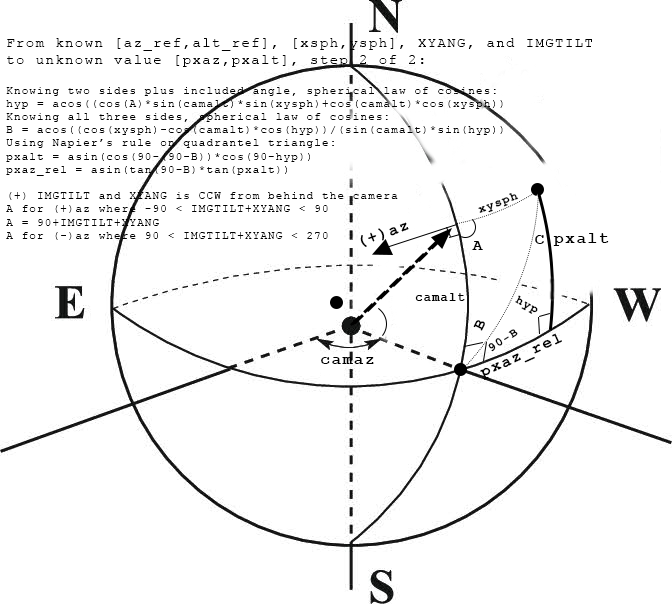
<style>
.page{position:relative;width:672px;height:604px;background:#ffffff}
.page>*{position:absolute;margin:0}
.t1{font:11px "CourierNewPSMT";letter-spacing:0.1em;color:#000000}
.t2{font:14px "CourierNewPSMT";letter-spacing:0.1em;color:#000000}
.t3{font:12px "CourierNewPS-BoldMT";letter-spacing:0.1em;color:#000000}
.t4{font:16px "CourierNewPS-BoldMT";letter-spacing:0.1em;color:#000000}
</style>
<div class="page">
<p class="t1" style="left:6px;top:38px;width:586px;height:202px"><span class="t2">From known [az_ref,alt_ref], [xsph,ysph], XYANG, and IMGTILT<br>to unknown value [pxaz,pxalt], step 2 of 2:<br><br></span>Knowing two sides plus included angle, spherical law of cosines:<br>hyp = acos((cos(A)*sin(camalt)*sin(xysph)+cos(camalt)*cos(xysph))<br>Knowing all three sides, spherical law of cosines:<br>B = acos((cos(xysph)-cos(camalt)*cos(hyp))/(sin(camalt)*sin(hyp))<br>Using Napier’s rule on quadrantel triangle:<br>pxalt = asin(cos(90-(90-B))*cos(90-hyp))<br>pxaz_rel = asin(tan(90-B)*tan(pxalt))<br><br>(+) IMGTILT and XYANG is CCW from behind the camera<br>A for (+)az where -90 &lt; IMGTILT+XYANG &lt; 90<br>A = 90+IMGTILT+XYANG<br>A for (-)az where 90 &lt; IMGTILT+XYANG &lt; 270</p>
<p class="t3" style="left:478px;top:193px;width:41px;height:20px;rotate:-20deg">xysph</p>
<p class="t4" style="left:360px;top:222px;width:49px;height:25px;rotate:-20deg">(+)az</p>
<p class="t4" style="left:553px;top:233px;width:56px;height:13px">pxalt</p>
<p class="t4" style="left:472px;top:241px;width:11px;height:9px">A</p>
<p class="t4" style="left:535px;top:235px;width:9px;height:9px">C</p>
<p class="t3" style="left:415px;top:293px;width:50px;height:8px">camalt</p>
<p class="t3" style="left:515px;top:295px;width:23px;height:19px;rotate:28deg">hyp</p>
<p class="t4" style="left:473px;top:320px;width:12px;height:11px;rotate:-64deg">B</p>
<p class="t3" style="left:488px;top:329px;width:30px;height:23px;rotate:-33deg">90-B</p>
<p class="t4" style="left:480px;top:333px;width:82px;height:47px;rotate:-24deg">pxaz_rel</p>
<p class="t4" style="left:321px;top:357px;width:53px;height:7px">camaz</p>
</div>
